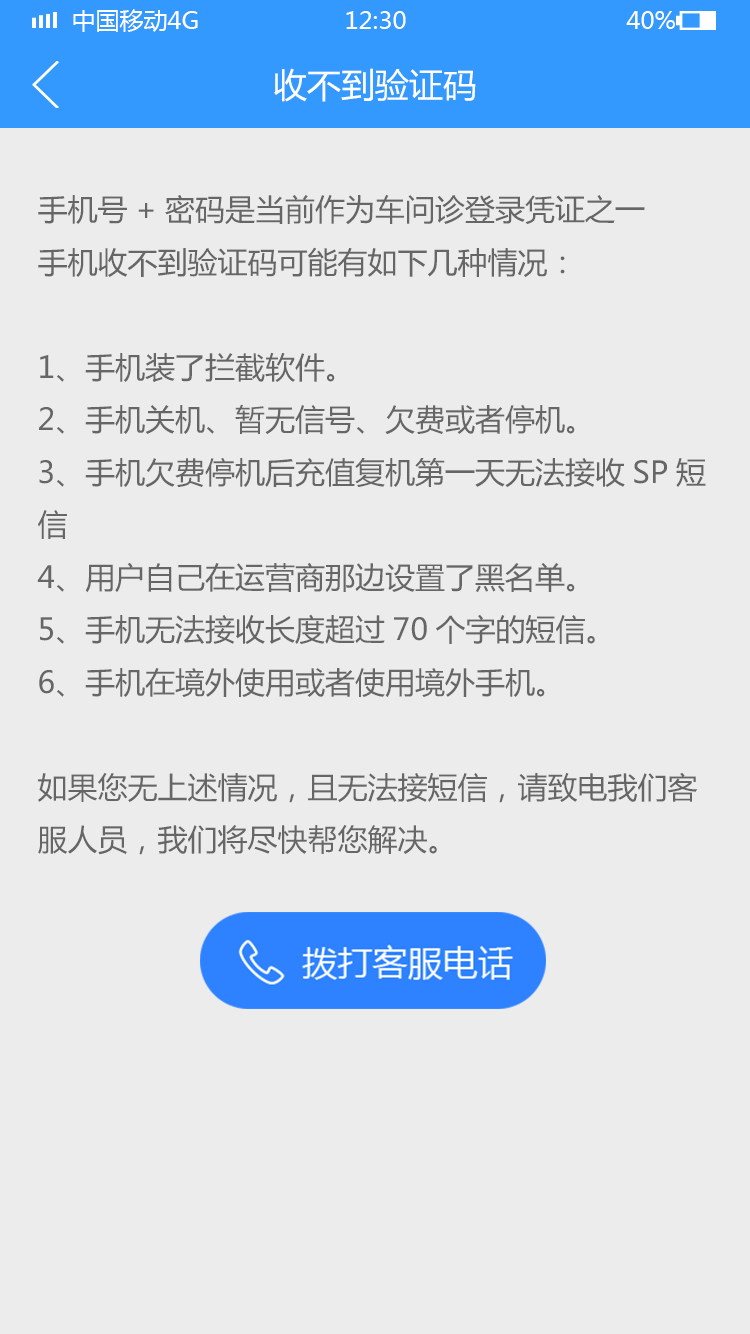
<style>
.page{position:relative;width:750px;height:1334px;background:#ececec}
.page>*{position:absolute;margin:0}
.t1{font:24px "MicrosoftYaHei";color:#ffffff;text-transform:uppercase}
.t2{font:34px "MicrosoftYaHei";color:#ffffff}
.t3{font:30px "MicrosoftYaHei";color:#666666}
</style>
<div class="page">
<p class="t1" style="left:73px;top:9px;width:125px;height:23px">中国移动4G</p>
<p class="t1" style="left:346px;top:11px;width:60px;height:18px">12:30</p>
<p class="t1" style="left:626px;top:11px;width:49px;height:18px">40%</p>
<p class="t2" style="left:274px;top:68px;width:202px;height:34px">收不到验证码</p>
<p class="t3" style="left:37px;top:195px;width:669px;height:660px">手机号+密码是当前作为车问诊登录凭证之一<br>手机收不到验证码可能有如下几种情况：<br><br>1、手机装了拦截软件。<br>2、手机关机、暂无信号、欠费或者停机。<br>3、手机欠费停机后充值复机第一天无法接收SP短信<br>4、用户自己在运营商那边设置了黑名单。<br>5、手机无法接收长度超过70个字的短信。<br>6、手机在境外使用或者使用境外手机。<br><br>如果您无上述情况，且无法接短信，请致电我们客服人员，我们将尽快帮您解决。</p>
</div>
